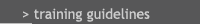
<style>
.page{position:relative;width:200px;height:24px;background:#575758}
.page>*{position:absolute;margin:0}
.t1{font:14px "TrebuchetMS";color:#cccccc}
</style>
<div class="page">
<p class="t1" style="left:23px;top:8px;width:127px;height:14px">&gt; training guidelines</p>
</div>
